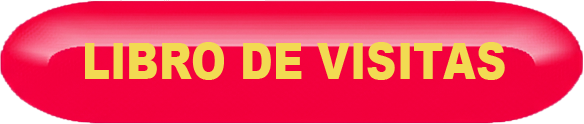
<style>
.page{position:relative;width:584px;height:124px}
.page>*{position:absolute;margin:0}
.t1{font:49.7px "Arial-Black";color:#f2da52;scale:0.84 1}
</style>
<div class="page">
<p class="t1" style="left:85px;top:42px;width:420px;height:38px">LIBRO DE VISITAS</p>
</div>
